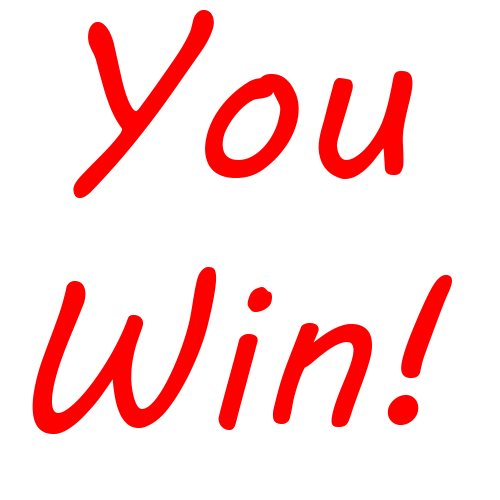
<style>
.page{position:relative;width:500px;height:500px;background:#ffffff}
.page>*{position:absolute;margin:0}
.t1{font:208.3px "MVBoli";color:#ff0000}
</style>
<div class="page">
<p class="t1" style="left:32px;top:10px;width:420px;height:424px;text-align:center">You Win!</p>
</div>
